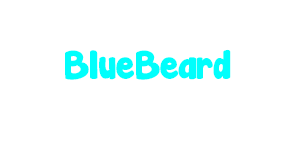
<style>
.page{position:relative;width:283px;height:142px;background:#ffffff}
.page>*{position:absolute;margin:0}
.t1{font:36px "JandaManateeSolid";color:#00fffc}
</style>
<div class="page">
<p class="t1" style="left:65px;top:49px;width:166px;height:31px">BlueBeard</p>
</div>
